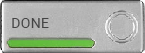
<style>
.page{position:relative;width:145px;height:53px}
.page>*{position:absolute;margin:0}
.t1{font:14.5px "Roboto-Regular";color:#444444}
</style>
<div class="page">
<p class="t1" style="left:12px;top:18px;width:37px;height:10px">DONE</p>
</div>
